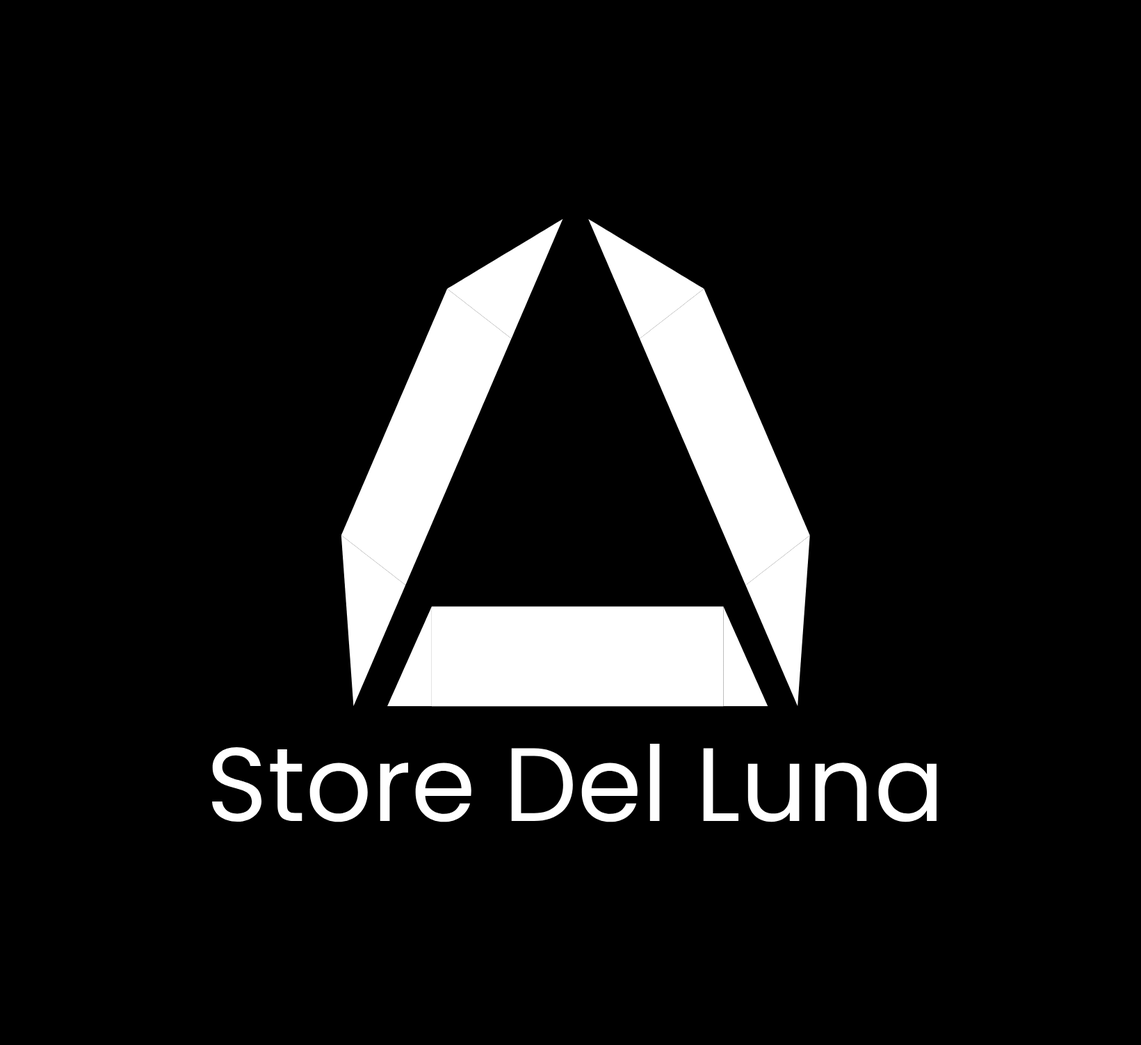
<style>
.page{position:relative;width:1141px;height:1045px;background:#000000}
.page>*{position:absolute;margin:0}
.t1{font:104.3px "Poppins-Regular";color:#ffffff}
</style>
<div class="page">
<p class="t1" style="left:212px;top:744px;width:725px;height:78px">Store Del Luna</p>
</div>
